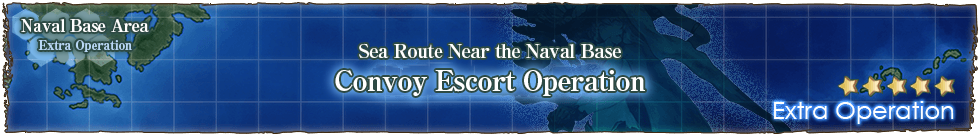
<style>
.page{position:relative;width:980px;height:136px}
.page>*{position:absolute;margin:0}
.t1{font:17px/22px "RyuminPro-ExBold";letter-spacing:-0.04em;color:#ffffff}
.t2{font:13px/22px "RyuminPro-ExBold";letter-spacing:-0.04em;color:#b9d7f5}
.t3{font:19px "RyuminPro-ExBold";letter-spacing:-0.04em;color:#ffffff}
.t4{font:28px "RyuminPro-ExBold";letter-spacing:-0.04em;color:#ffffff}
</style>
<div class="page">
<p class="t1" style="left:21px;top:19px;width:128px;height:33px">Naval Base Area<br>　　　<span class="t2">Extra Operation</span></p>
<p class="t3" style="left:359px;top:43px;width:262px;height:16px">Sea Route Near the Naval Base</p>
<p class="t4" style="left:335px;top:70px;width:310px;height:26px">Convoy Escort Operation</p>
</div>
